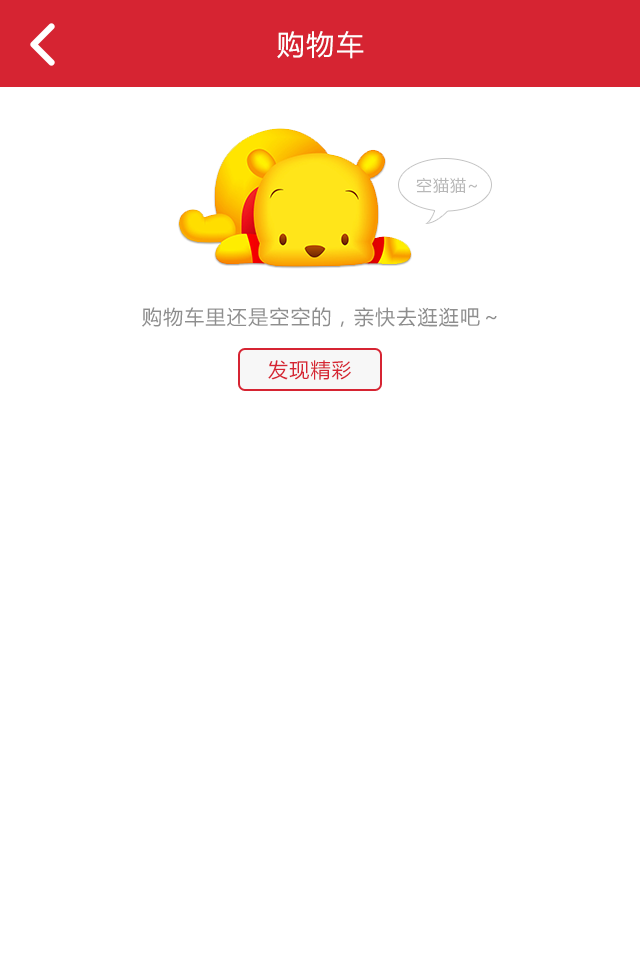
<style>
.page{position:relative;width:640px;height:960px;background:#ffffff}
.page>*{position:absolute;margin:0}
.t1{font:28px "MicrosoftYaHei";letter-spacing:0.06em;color:#ffffff}
.t2{font:16px "MicrosoftYaHei";letter-spacing:0.06em;color:#b8b8b8}
.t3{font:20px "MicrosoftYaHei";letter-spacing:0.06em;color:#8e8e8e}
.t4{font:20px "MicrosoftYaHei";letter-spacing:0.06em;color:#d62432}
</style>
<div class="page">
<p class="t1" style="left:277px;top:31px;width:87px;height:28px">购物车</p>
<p class="t2" style="left:416px;top:177px;width:61px;height:16px">空猫猫~</p>
<p class="t3" style="left:142px;top:307px;width:355px;height:20px">购物车里还是空空的，亲快去逛逛吧～</p>
<p class="t4" style="left:268px;top:360px;width:83px;height:20px">发现精彩</p>
</div>
